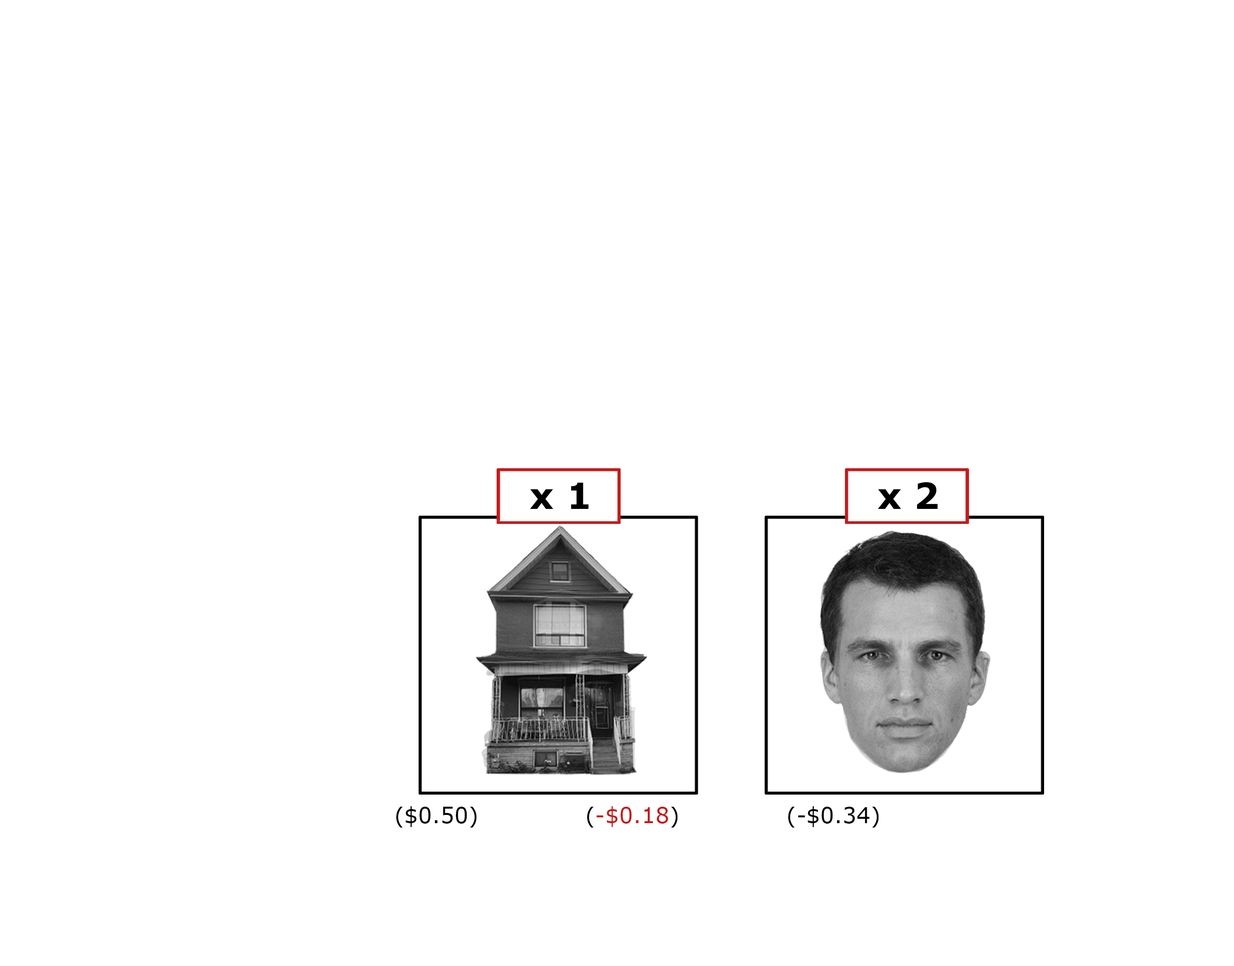
<style>
.page{position:relative;width:1234px;height:966px;background:#ffffff}
.page>*{position:absolute;margin:0}
.t1{font:36px "Verdana-Bold";letter-spacing:0.005em;color:#000000}
.t2{font:21.9px "Verdana";letter-spacing:0.005em;color:#000000}
.t3{font:21.9px "Verdana";letter-spacing:0.005em;color:#c41b1b}
</style>
<div class="page">
<p class="t1" style="left:530px;top:482px;width:59px;height:27px">x 1</p>
<p class="t1" style="left:878px;top:482px;width:60px;height:27px">x 2</p>
<p class="t2" style="left:396px;top:807px;width:81px;height:21px">($0.50)</p>
<p class="t3" style="left:587px;top:807px;width:91px;height:21px"><span class="t2">(</span>-$0.18<span class="t2">)</span></p>
<p class="t2" style="left:788px;top:807px;width:91px;height:21px">(-$0.34)</p>
</div>
